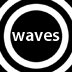
<style>
.page{position:relative;width:72px;height:72px;background:#000000}
.page>*{position:absolute;margin:0}
.t1{font:18px "MyriadPro-Semibold";color:#ffffff}
</style>
<div class="page">
<p class="t1" style="left:12px;top:32px;width:48px;height:9px">waves</p>
</div>
